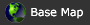
<style>
.page{position:relative;width:90px;height:25px;background:#333333}
.page>*{position:absolute;margin:0}
.t1{font:11px "Verdana";color:#ffffff}
</style>
<div class="page">
<p class="t1" style="left:31px;top:8px;width:52px;height:11px">Base Map</p>
</div>
